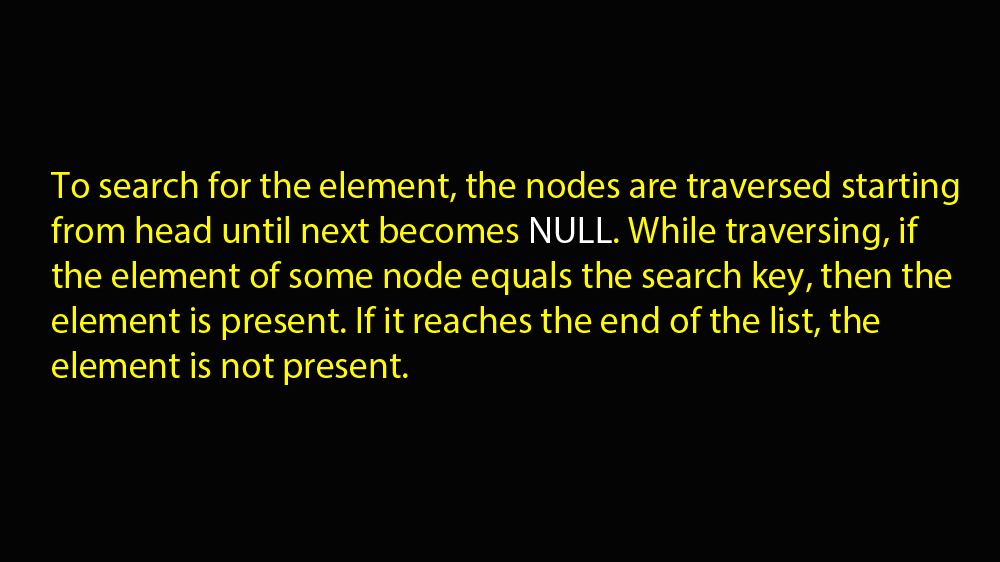
<style>
.page{position:relative;width:1000px;height:562px;background:#050404}
.page>*{position:absolute;margin:0}
.t1{font:37.5px "MyriadPro-Regular";color:#fefb04}
.t2{font:33.3px "MyriadPro-Regular";color:#fefb04}
.t3{font:37.5px "MyriadPro-Regular";color:#ffffff}
</style>
<div class="page">
<p class="t1" style="left:51px;top:171px;width:908px;height:214px"><span class="t2"><br><br><br></span>To search for the element, the nodes are traversed starting from head until next becomes <span class="t3">NULL</span>. While traversing, if the element of some node equals the search key, then the element is present. If it reaches the end of the list, the element is not present.</p>
</div>
